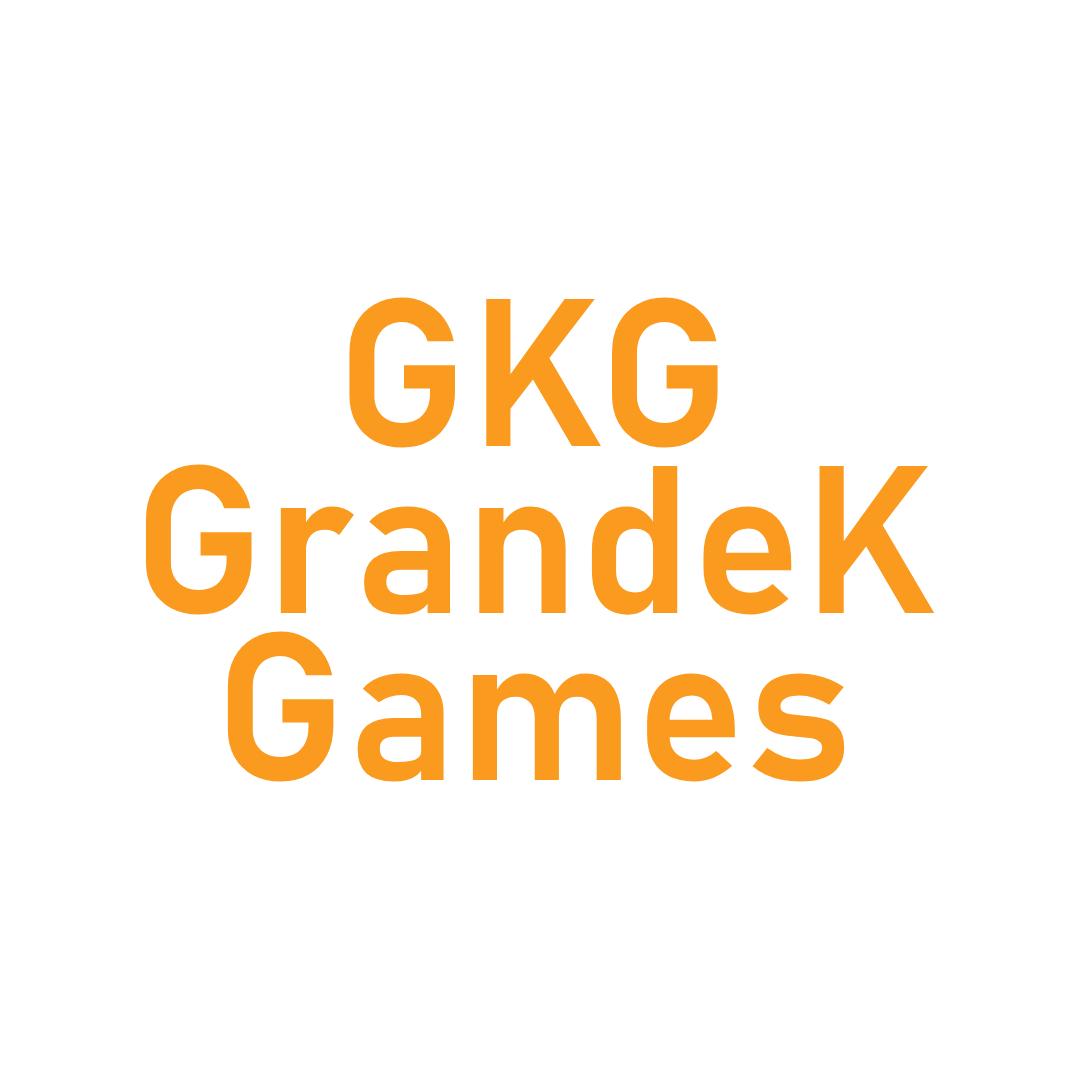
<style>
.page{position:relative;width:1080px;height:1080px;background:#ffffff}
.page>*{position:absolute;margin:0}
.t1{font:207px/167px "Bahnschrift-SemiBold";color:#fa9a1e}
.t2{font:207px "Bahnschrift-SemiBold";color:#fa9a1e}
</style>
<div class="page">
<p class="t1" style="left:145px;top:297px;width:790px;height:485px;text-align:center"><span class="t2">GKG<br></span>GrandeK <br>Games</p>
</div>
